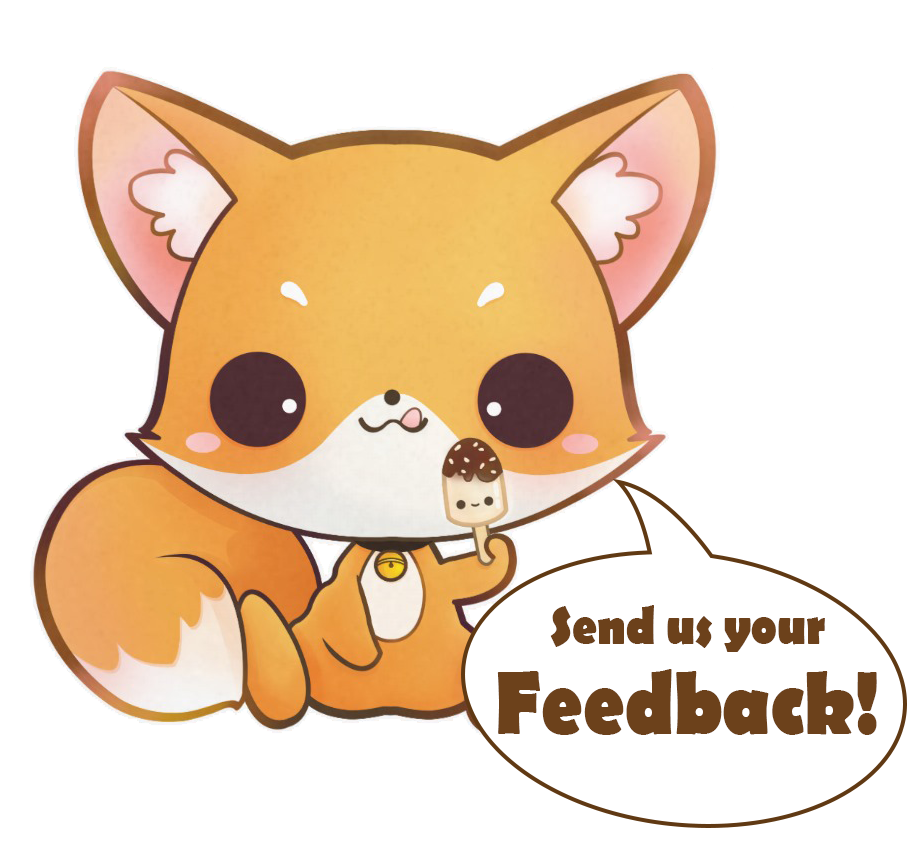
<style>
.page{position:relative;width:922px;height:848px;background:#ffffff}
.page>*{position:absolute;margin:0}
.t1{font:53.9px/89.9px "BerlinSansFB-Bold";color:#6c411b;scale:0.87 1}
.t2{font:89.9px/89.9px "BerlinSansFB-Bold";color:#6c411b;scale:0.87 1}
</style>
<div class="page">
<p class="t1" style="left:497px;top:605px;width:380px;height:130px;text-align:center">Send us your<br><span class="t2">Feedback!</span></p>
</div>
